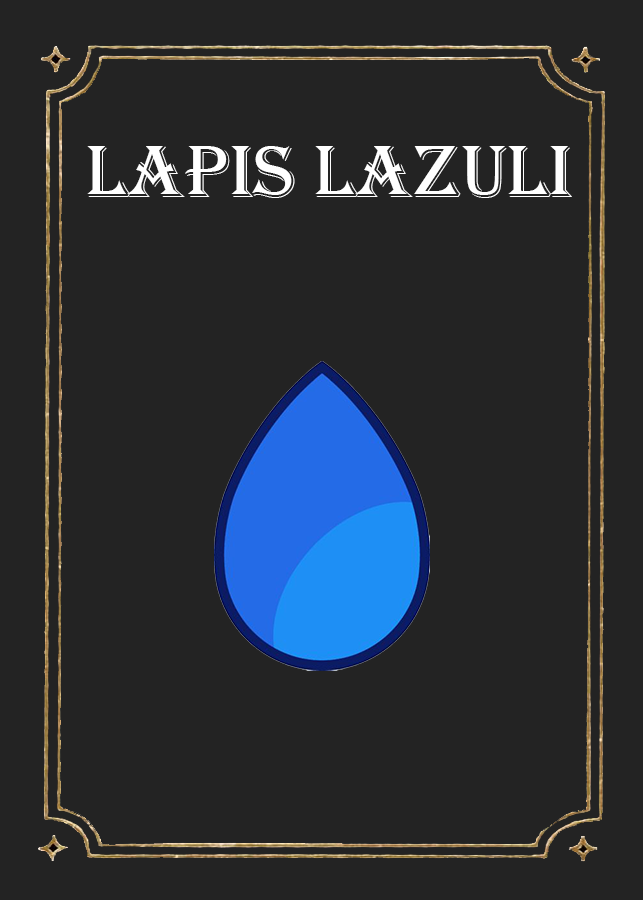
<style>
.page{position:relative;width:643px;height:900px;background:#232323}
.page>*{position:absolute;margin:0}
.t1{font:75.8px "Algerian";color:#ffffff}
</style>
<div class="page">
<p class="t1" style="left:87px;top:146px;width:485px;height:52px">Lapis Lazuli</p>
</div>
